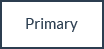
<style>
.page{position:relative;width:104px;height:49px;background:#ffffff}
.page>*{position:absolute;margin:0}
.t1{font:15px "Lato-Regular";color:#2c3e50}
</style>
<div class="page">
<p class="t1" style="left:26px;top:18px;width:52px;height:14px">Primary</p>
</div>
